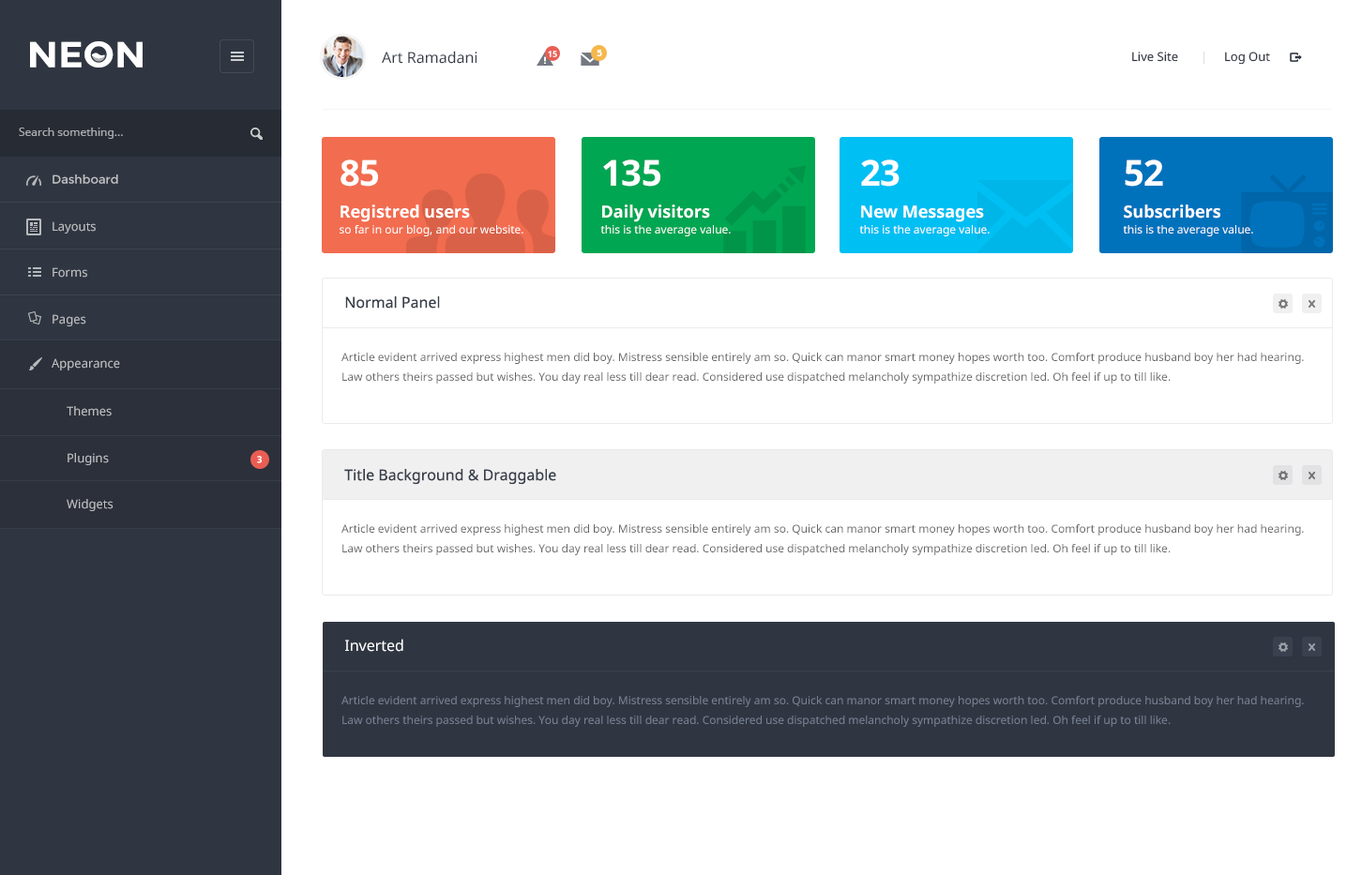
<style>
.page{position:relative;width:1362px;height:875px;background:#ffffff}
.page>*{position:absolute;margin:0}
.t1{font:36.4px "Montserrat-Bold";color:#ffffff;scale:1.06 1}
.t2{font:15px "NotoSans";color:#373e4a}
.t3{font:8.4px "NotoSans-Bold";color:#ffffff}
.t4{font:9.4px "NotoSans-Bold";color:#ffffff}
.t5{font:12.2px "NotoSans";color:#303641}
.t6{font:11.3px "NotoSans";color:#aaabae}
.t7{font:11.3px/15.9px "NotoSans";color:#ffffff}
.t8{font:35.7px/15.9px "NotoSans-Bold";color:#ffffff}
.t9{font:16.9px/15.9px "NotoSans-Bold";color:#ffffff}
.t10{font:12.2px "Montserrat-Regular";color:#bec0c2}
.t11{font:12.2px "NotoSans";color:#bec0c2}
.t12{font:11.3px/19.7px "NotoSans";color:#666666}
.t13{font:12.2px "NotoSans";color:#bebec0}
.t14{font:15px "NotoSans";color:#ffffff}
.t15{font:11.3px/19.7px "NotoSans";color:#778193}
</style>
<div class="page">
<p class="t1" style="left:30px;top:41px;width:113px;height:27px">NEON</p>
<p class="t2" style="left:382px;top:51px;width:96px;height:13px">Art Ramadani</p>
<p class="t3" style="left:548px;top:51px;width:9px;height:6px">15</p>
<p class="t4" style="left:597px;top:50px;width:5px;height:6px">5</p>
<p class="t5" style="left:1132px;top:52px;width:46px;height:10px">Live Site</p>
<p class="t5" style="left:1225px;top:52px;width:45px;height:13px">Log Out</p>
<p class="t6" style="left:19px;top:128px;width:104px;height:11px">Search something...</p>
<p class="t7" style="left:340px;top:159px;width:184px;height:77px"><span class="t8">85<br><br></span><span class="t9">Registred users<br></span>so far in our blog, and our website.</p>
<p class="t7" style="left:600px;top:159px;width:131px;height:77px"><span class="t8">135<br><br></span><span class="t9">Daily visitors<br></span>this is the average value.</p>
<p class="t7" style="left:859px;top:159px;width:131px;height:77px"><span class="t8">23<br><br></span><span class="t9">New Messages<br></span>this is the average value.</p>
<p class="t7" style="left:1123px;top:159px;width:130px;height:77px"><span class="t8">52<br><br></span><span class="t9">Subscribers<br></span>this is the average value.</p>
<p class="t10" style="left:53px;top:175px;width:65px;height:9px">Dashboard</p>
<p class="t11" style="left:53px;top:221px;width:43px;height:13px">Layouts</p>
<p class="t11" style="left:53px;top:267px;width:34px;height:11px">Forms</p>
<p class="t2" style="left:345px;top:296px;width:95px;height:13px">Normal Panel</p>
<p class="t11" style="left:53px;top:314px;width:33px;height:12px">Pages</p>
<p class="t12" style="left:342px;top:353px;width:962px;height:31px">Article evident arrived express highest men did boy. Mistress sensible entirely am so. Quick can manor smart money hopes worth too. Comfort produce husband boy her had hearing. Law others theirs passed but wishes. You day real less till dear read. Considered use dispatched melancholy sympathize discretion led. Oh feel if up to till like.</p>
<p class="t13" style="left:52px;top:358px;width:68px;height:13px">Appearance</p>
<p class="t13" style="left:67px;top:406px;width:45px;height:11px">Themes</p>
<p class="t13" style="left:68px;top:453px;width:41px;height:12px">Plugins</p>
<p class="t4" style="left:257px;top:456px;width:5px;height:7px">3</p>
<p class="t2" style="left:344px;top:469px;width:212px;height:16px">Title Background &amp; Draggable</p>
<p class="t13" style="left:67px;top:499px;width:47px;height:12px">Widgets</p>
<p class="t12" style="left:342px;top:524px;width:962px;height:31px">Article evident arrived express highest men did boy. Mistress sensible entirely am so. Quick can manor smart money hopes worth too. Comfort produce husband boy her had hearing. Law others theirs passed but wishes. You day real less till dear read. Considered use dispatched melancholy sympathize discretion led. Oh feel if up to till like.</p>
<p class="t14" style="left:345px;top:639px;width:58px;height:13px">Inverted</p>
<p class="t15" style="left:342px;top:696px;width:962px;height:31px">Article evident arrived express highest men did boy. Mistress sensible entirely am so. Quick can manor smart money hopes worth too. Comfort produce husband boy her had hearing. Law others theirs passed but wishes. You day real less till dear read. Considered use dispatched melancholy sympathize discretion led. Oh feel if up to till like.</p>
</div>
